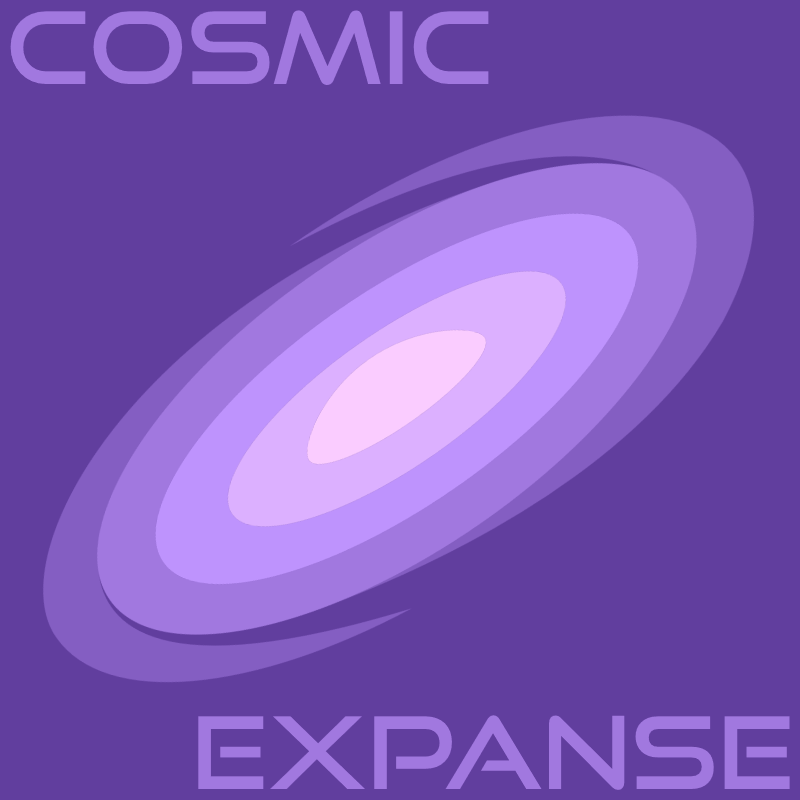
<style>
.page{position:relative;width:800px;height:800px;background:#613e9e}
.page>*{position:absolute;margin:0}
.t1{font:100px "GoodTimesRg-Regular";color:#a178df}
</style>
<div class="page">
<p class="t1" style="left:10px;top:10px;width:479px;height:75px">COSMIC</p>
<p class="t1" style="left:198px;top:715px;width:592px;height:75px">EXPANSE</p>
</div>
